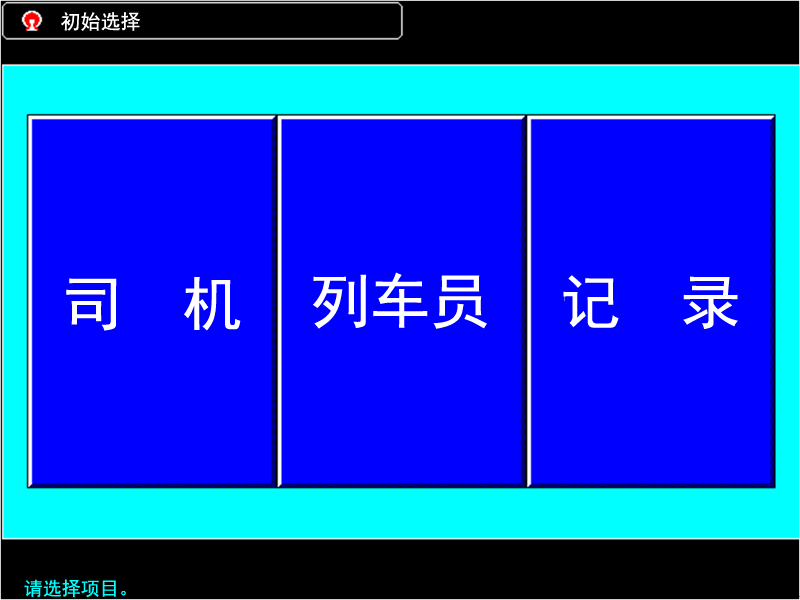
<style>
.page{position:relative;width:800px;height:600px;background:#0000ff}
.page>*{position:absolute;margin:0}
.t1{font:20px "SimHei";color:#ffffff}
.t2{font:60px "SimHei";color:#ffffff}
.t3{font:19px "SimHei";color:#00ffff}
</style>
<div class="page">
<p class="t1" style="left:61px;top:12px;width:79px;height:19px">初始选择</p>
<p class="t2" style="left:66px;top:277px;width:175px;height:54px">司  机</p>
<p class="t2" style="left:313px;top:272px;width:174px;height:57px">列车员</p>
<p class="t2" style="left:563px;top:275px;width:175px;height:54px">记  录</p>
<p class="t3" style="left:24px;top:579px;width:102px;height:19px">请选择项目。</p>
</div>
